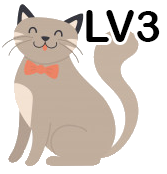
<style>
.page{position:relative;width:167px;height:174px;background:#ffffff}
.page>*{position:absolute;margin:0}
.t1{font:43.7px "ArialRoundedMTBold";color:#000000}
</style>
<div class="page">
<p class="t1" style="left:86px;top:10px;width:74px;height:32px">LV3</p>
</div>
